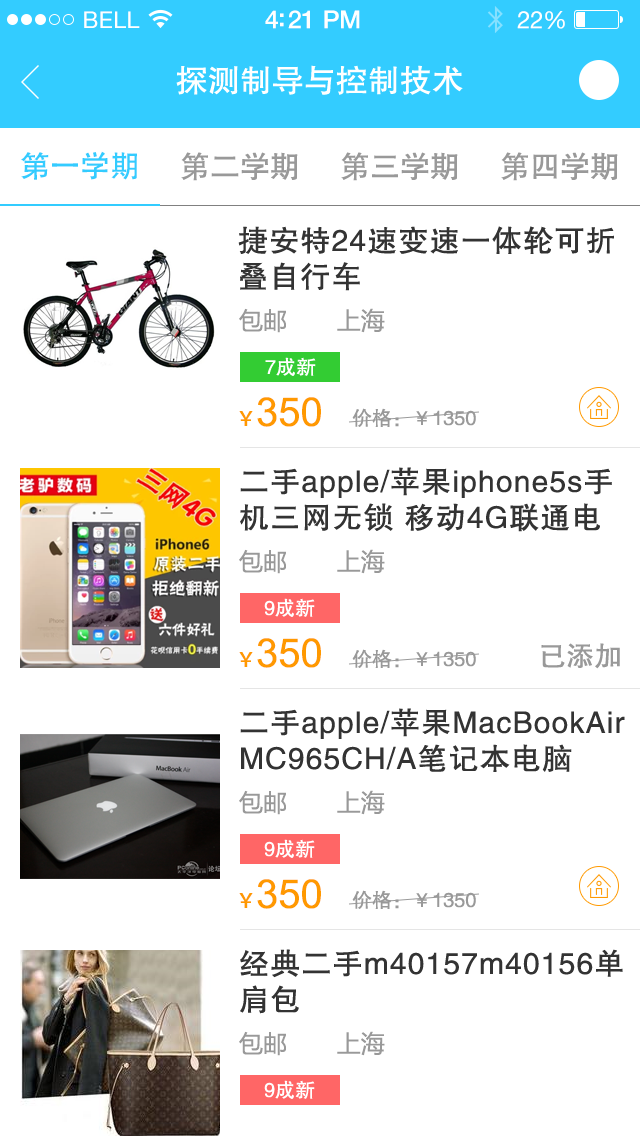
<style>
.page{position:relative;width:640px;height:1136px;background:#ffffff}
.page>*{position:absolute;margin:0}
.t1{font:23px "HelveticaNeue";letter-spacing:0.02em;color:#ffffff}
.t2{font:25px "HelveticaNeue-Medium";letter-spacing:-0.02em;color:#ffffff}
.t3{font:24px "HelveticaNeue";letter-spacing:-0.02em;color:#ffffff}
.t4{font:32px "FZHTJW--GB1-0";color:#ffffff}
.t5{font:30px "AdobeHeitiStd-Regular";color:#33ccff}
.t6{font:30px "FZHTJW--GB1-0";color:#999999}
.t7{font:30px/36px "FZHTJW--GB1-0";letter-spacing:0.04em;color:#333333}
.t8{font:24px "MicrosoftYaHei";color:#999999}
.t9{font:20px "FZHTJW--GB1-0";color:#ffffff}
.t10{font:40px "ArialMT";color:#ff9900}
.t11{font:20px "AdobeHeitiStd-Regular";color:#ff9900}
.t12{font:20px "FZHTJW--GB1-0";color:#999999}
.t13{font:28px "FZHTJW--GB1-0";color:#999999}
</style>
<div class="page">
<p class="t1" style="left:84px;top:11px;width:56px;height:17px">BELL</p>
<p class="t2" style="left:265px;top:10px;width:95px;height:19px">4:21 PM</p>
<p class="t3" style="left:517px;top:11px;width:48px;height:18px">22%</p>
<p class="t4" style="left:176px;top:65px;width:287px;height:30px">探测制导与控制技术</p>
<p class="t5" style="left:21px;top:151px;width:116px;height:29px">第一学期</p>
<p class="t6" style="left:181px;top:152px;width:117px;height:29px">第二学期</p>
<p class="t6" style="left:341px;top:152px;width:117px;height:29px">第三学期</p>
<p class="t6" style="left:501px;top:152px;width:117px;height:29px">第四学期</p>
<p class="t7" style="left:238px;top:226px;width:376px;height:65px">捷安特24速变速一体轮可折<br>叠自行车</p>
<p class="t8" style="left:239px;top:308px;width:146px;height:25px">包邮       上海</p>
<p class="t9" style="left:265px;top:357px;width:51px;height:19px">7成新</p>
<p class="t10" style="left:239px;top:397px;width:82px;height:30px"><span class="t11">￥</span>350</p>
<p class="t12" style="left:352px;top:408px;width:124px;height:19px">价格：￥1350</p>
<p class="t7" style="left:240px;top:467px;width:372px;height:65px">二手apple/苹果iphone5s手<br>机三网无锁 移动4G联通电</p>
<p class="t8" style="left:239px;top:549px;width:146px;height:25px">包邮       上海</p>
<p class="t9" style="left:264px;top:598px;width:51px;height:19px">9成新</p>
<p class="t10" style="left:239px;top:638px;width:82px;height:30px"><span class="t11">￥</span>350</p>
<p class="t12" style="left:352px;top:649px;width:124px;height:19px">价格：￥1350</p>
<p class="t13" style="left:541px;top:643px;width:79px;height:26px">已添加</p>
<p class="t7" style="left:240px;top:708px;width:385px;height:64px">二手apple/苹果MacBookAir<br>MC965CH/A笔记本电脑</p>
<p class="t8" style="left:239px;top:790px;width:146px;height:25px">包邮       上海</p>
<p class="t9" style="left:264px;top:839px;width:51px;height:19px">9成新</p>
<p class="t10" style="left:239px;top:879px;width:82px;height:30px"><span class="t11">￥</span>350</p>
<p class="t12" style="left:352px;top:890px;width:124px;height:19px">价格：￥1350</p>
<p class="t7" style="left:240px;top:949px;width:383px;height:65px">经典二手m40157m40156单<br>肩包</p>
<p class="t8" style="left:239px;top:1031px;width:146px;height:25px">包邮       上海</p>
<p class="t9" style="left:264px;top:1080px;width:51px;height:19px">9成新</p>
</div>
